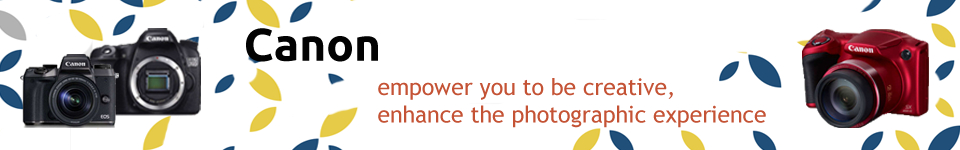
<style>
.page{position:relative;width:960px;height:150px;background:#ffffff}
.page>*{position:absolute;margin:0}
.t1{font:45.8px "Ubuntu-Bold";color:#020202}
.t2{font:22.9px "TrebuchetMS";color:#c45234}
</style>
<div class="page">
<p class="t1" style="left:246px;top:28px;width:132px;height:34px">Canon</p>
<p class="t2" style="left:378px;top:78px;width:388px;height:50px">empower you to be creative,<br>enhance the photographic experience</p>
</div>
